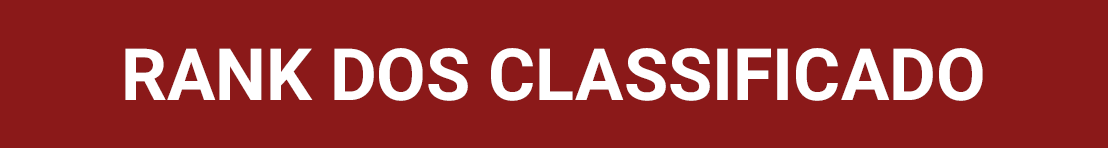
<style>
.page{position:relative;width:1108px;height:148px;background:#8b1919}
.page>*{position:absolute;margin:0}
.t1{font:72px "Roboto-Bold";color:#ffffff}
</style>
<div class="page">
<p class="t1" style="left:125px;top:48px;width:858px;height:53px">RANK DOS CLASSIFICADO</p>
</div>
